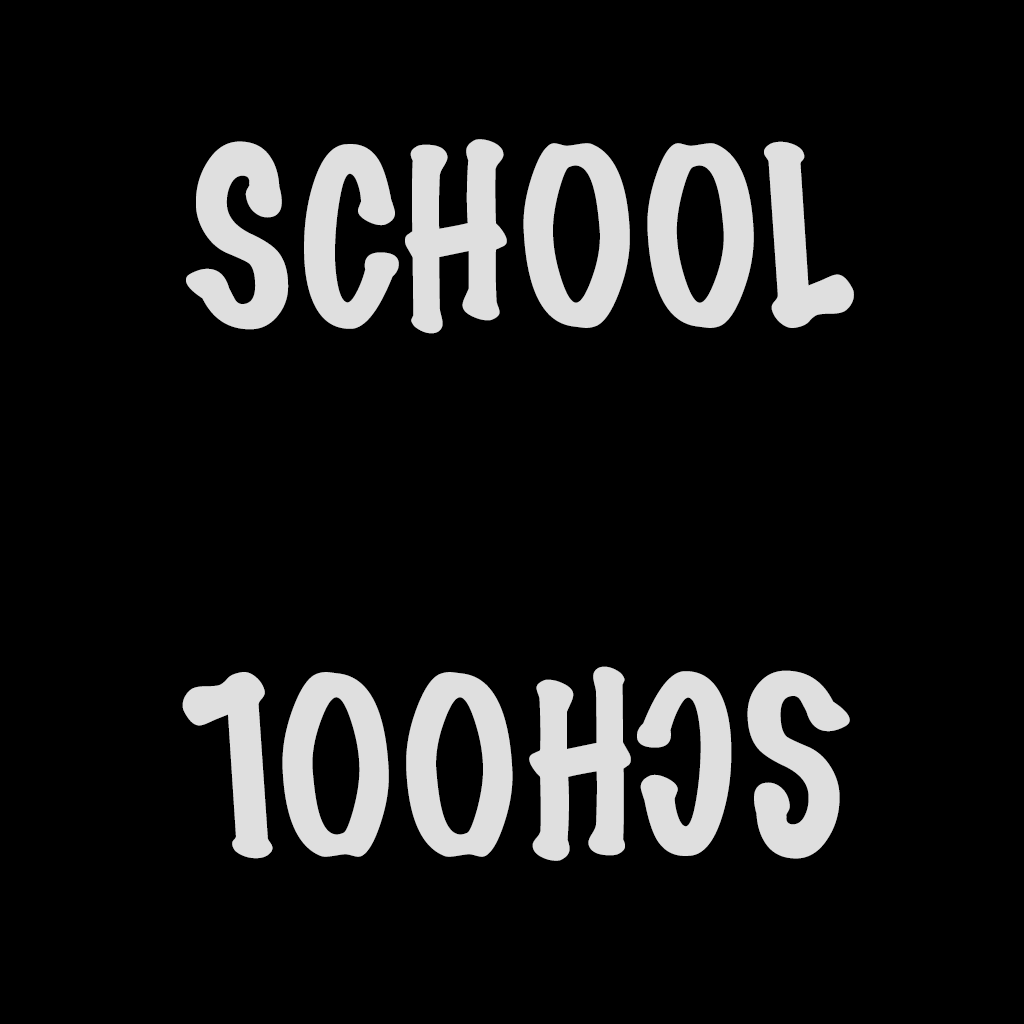
<style>
.page{position:relative;width:1024px;height:1024px;background:#000000}
.page>*{position:absolute;margin:0}
.t1{font:220.2px "MarkerFelt-Thin";color:#dfdfdf}
</style>
<div class="page">
<p class="t1" style="left:186px;top:139px;width:668px;height:195px">SCHOOL</p>
<p class="t1" style="left:182px;top:666px;width:668px;height:195px;rotate:180deg">SCHOOL</p>
</div>
